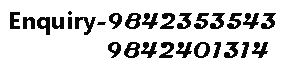
<style>
.page{position:relative;width:285px;height:70px;background:#ffffff}
.page>*{position:absolute;margin:0}
.t1{font:24px "Magneto-Bold";color:#080808}
.t2{font:24px "MicrosoftNewTaiLue-Bold";color:#080808}
</style>
<div class="page">
<p class="t1" style="left:10px;top:11px;width:266px;height:47px"><span class="t2">Enquiry</span>-9842353543<br>           9842401314</p>
</div>
